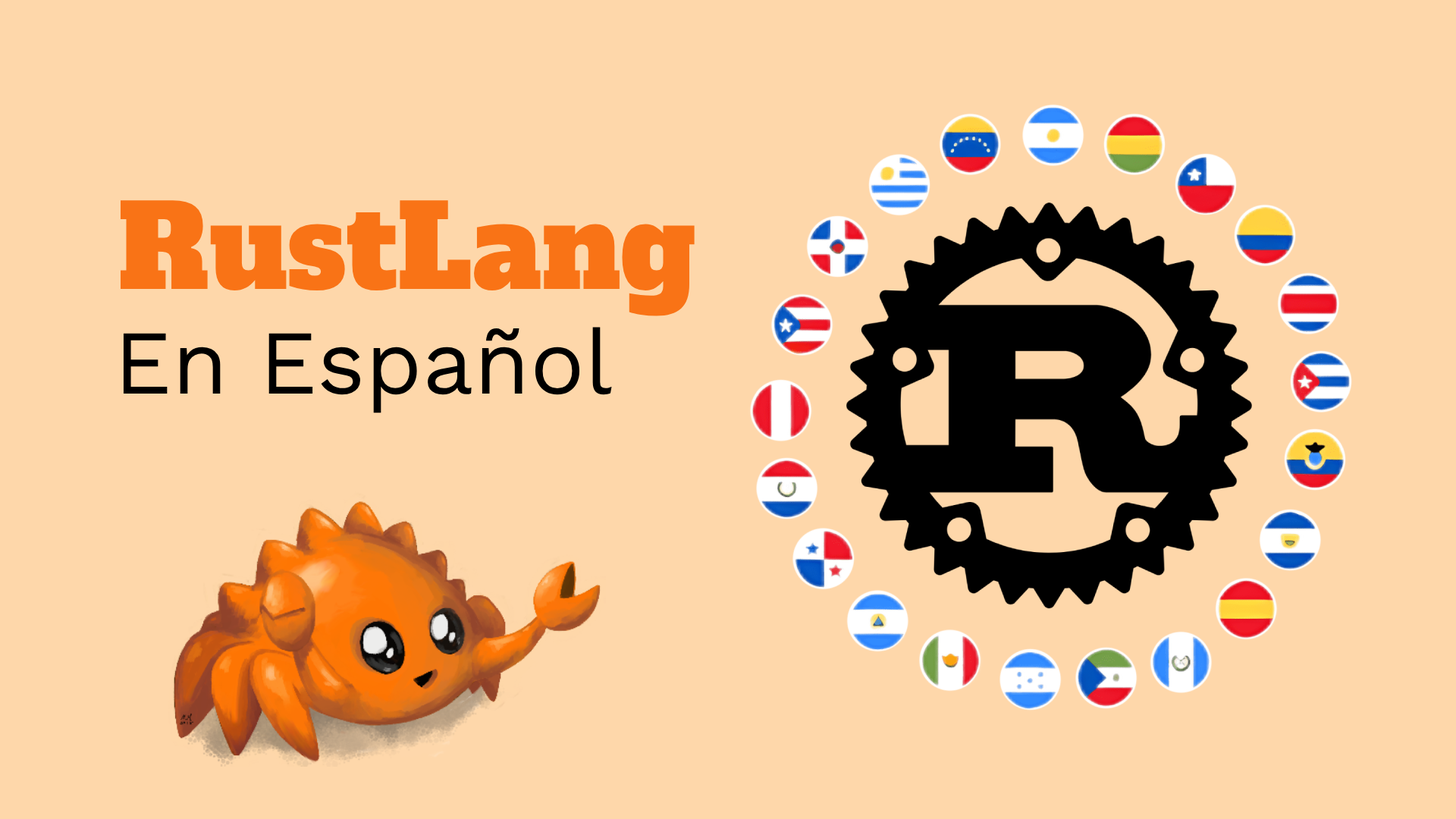
<style>
.page{position:relative;width:1456px;height:819px;background:#fed7aa}
.page>*{position:absolute;margin:0}
.t1{font:113.7px "AlfaSlabOne-Regular";color:#f97316}
.t2{font:91px "WorkSans-Regular";color:#000000}
</style>
<div class="page">
<p class="t1" style="left:121px;top:200px;width:574px;height:116px">RustLang</p>
<p class="t2" style="left:123px;top:327px;width:489px;height:86px">En Español</p>
</div>
